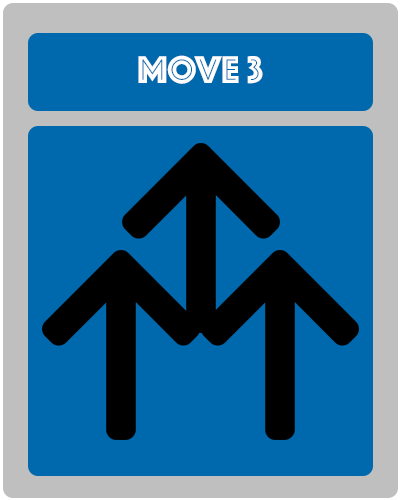
<style>
.page{position:relative;width:400px;height:500px;background:#0069ae}
.page>*{position:absolute;margin:0}
.t1{font:40px "Phosphate-Inline";color:#fefefe}
</style>
<div class="page">
<p class="t1" style="left:138px;top:55px;width:125px;height:29px">MOVE 3</p>
</div>
